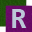
<style>
.page{position:relative;width:32px;height:32px}
.page>*{position:absolute;margin:0}
.t1{font:30px "Consolas-Bold";color:#bcc7d8}
</style>
<div class="page">
<p class="t1" style="left:12px;top:9px;width:15px;height:19px">R</p>
</div>
